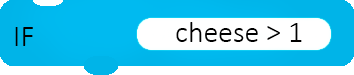
<style>
.page{position:relative;width:354px;height:75px;background:#ffffff}
.page>*{position:absolute;margin:0}
.t1{font:30px "Calibri-Light";color:#000000}
</style>
<div class="page">
<p class="t1" style="left:15px;top:27px;width:18px;height:19px">IF</p>
<p class="t1" style="left:176px;top:22px;width:126px;height:20px">cheese &gt; 1</p>
</div>
